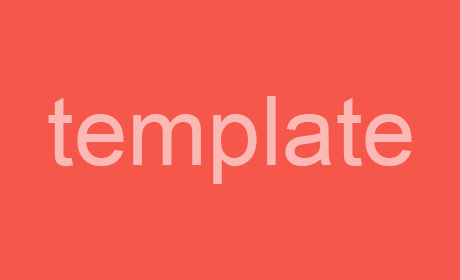
<style>
.page{position:relative;width:460px;height:280px;background:#f5584b}
.page>*{position:absolute;margin:0}
.t1{font:96px "ArialMT";color:#fab9b5}
</style>
<div class="page">
<p class="t1" style="left:48px;top:96px;width:364px;height:88px">template</p>
</div>
